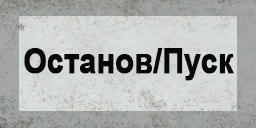
<style>
.page{position:relative;width:256px;height:128px}
.page>*{position:absolute;margin:0}
.t1{font:34px "Arial-BoldMT";color:#080808;font-weight:bold;scale:0.87 1}
</style>
<div class="page">
<p class="t1" style="left:24px;top:48px;width:210px;height:33px">Останов/Пуск</p>
</div>
